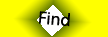
<style>
.page{position:relative;width:108px;height:37px;background:#ffff00}
.page>*{position:absolute;margin:0}
.t1{font:18px "MyriadPro-Regular";color:#020201}
</style>
<div class="page">
<p class="t1" style="left:39px;top:11px;width:31px;height:16px;rotate:5deg">Find</p>
</div>
